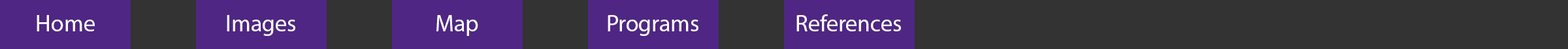
<style>
.page{position:relative;width:1568px;height:49px;background:#333333}
.page>*{position:absolute;margin:0}
.t1{font:23.5px "MyriadPro-Regular";color:#ffffff}
</style>
<div class="page">
<p class="t1" style="left:37px;top:15px;width:58px;height:16px">Home</p>
<p class="t1" style="left:227px;top:15px;width:68px;height:21px">Images</p>
<p class="t1" style="left:436px;top:15px;width:42px;height:21px">Map</p>
<p class="t1" style="left:608px;top:15px;width:90px;height:21px">Programs</p>
<p class="t1" style="left:796px;top:14px;width:105px;height:17px">References</p>
</div>
